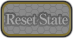
<style>
.page{position:relative;width:73px;height:38px;background:#8a8a8a}
.page>*{position:absolute;margin:0}
.t1{font:14px "RyuminPro-ExBold";letter-spacing:-0.08em;color:#a6a6a6}
</style>
<div class="page">
<p class="t1" style="left:5px;top:13px;width:63px;height:12px">Reset State</p>
</div>
